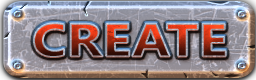
<style>
.page{position:relative;width:256px;height:80px}
.page>*{position:absolute;margin:0}
.t1{font:46.8px "SegoeUI-Bold";scale:1.17 1}
</style>
<div class="page">
<p class="t1" style="left:34px;top:23px;width:192px;height:34px">CREATE</p>
</div>
